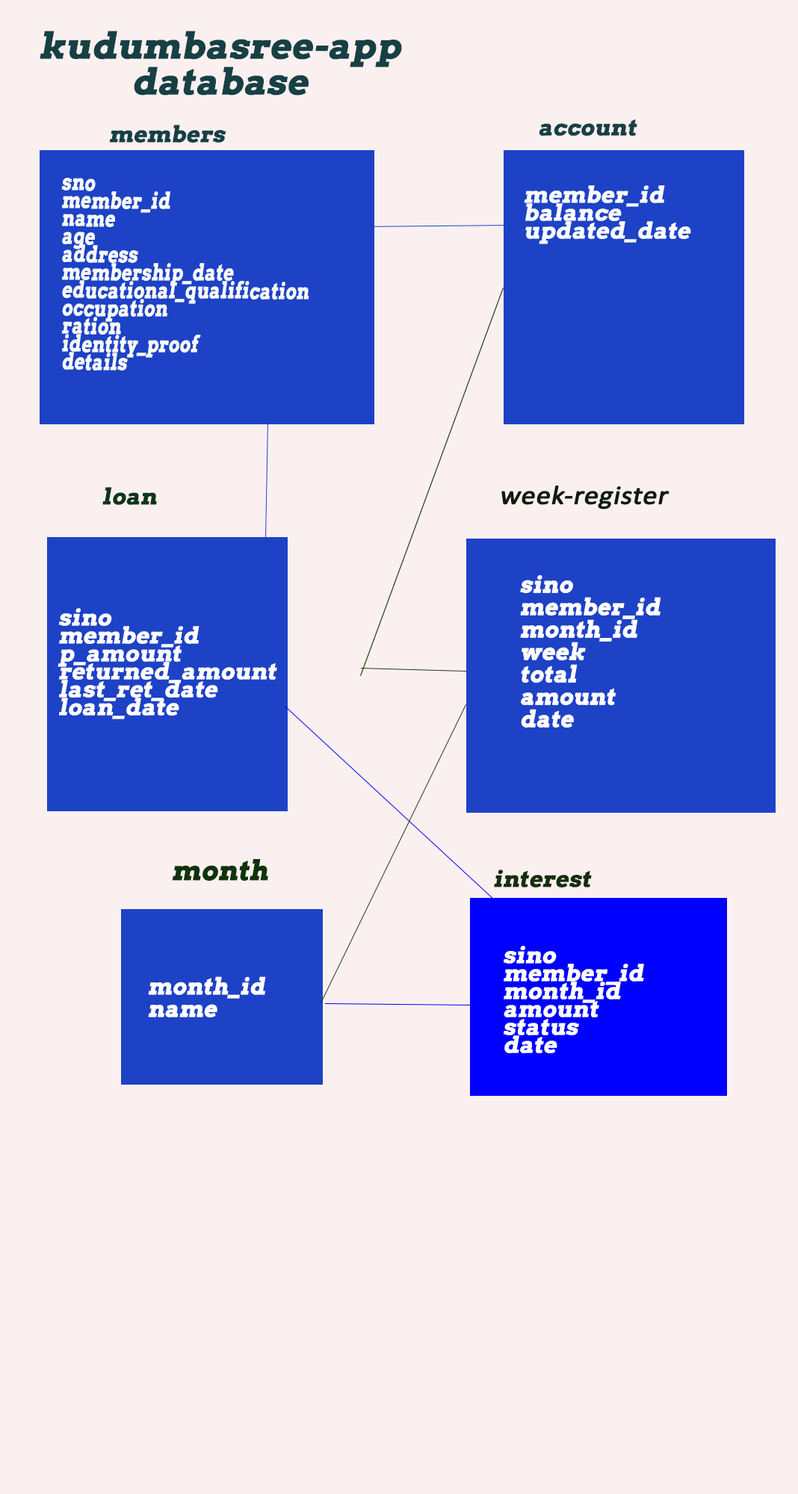
<style>
.page{position:relative;width:798px;height:1494px;background:#fbf0f0}
.page>*{position:absolute;margin:0}
.t1{font:35.9px/35.9px "Arvo-Bold";color:#164044;font-weight:bold;font-style:italic}
.t2{font:22.4px "Arvo-Bold";color:#164044;font-weight:bold;font-style:italic}
.t3{font:22.4px/17.9px "Arvo-Bold";color:#f6fbfb;font-weight:bold;font-style:italic;scale:0.77 1}
.t4{font:22.4px/17.9px "Arvo-Bold";color:#f7fcfd;font-weight:bold;font-style:italic}
.t5{font:26.4px "Calibri";color:#0f1c08;font-weight:bold;font-style:italic;scale:1.09 1}
.t6{font:22.4px "Arvo-Bold";color:#0d361b;font-weight:bold;font-style:italic}
.t7{font:22.4px/22.4px "Arvo-Bold";color:#ffffff;font-weight:bold;font-style:italic}
.t8{font:22.4px/17.9px "Arvo-Bold";color:#ffffff;font-weight:bold;font-style:italic}
.t9{font:26.9px "Arvo-Bold";color:#0f330a;font-weight:bold;font-style:italic}
.t10{font:22.4px "Arvo-Bold";color:#162e06;font-weight:bold;font-style:italic}
.t11{font:22.4px/17.9px "Arvo-Bold";color:#fcfffa;font-weight:bold;font-style:italic}
</style>
<div class="page">
<p class="t1" style="left:40px;top:31px;width:362px;height:65px;text-align:center">kudumbasree-app<br>database</p>
<p class="t2" style="left:109px;top:125px;width:117px;height:18px">members</p>
<p class="t2" style="left:539px;top:120px;width:98px;height:16px">account</p>
<p class="t3" style="left:61px;top:178px;width:248px;height:193px">sno<br>member_id<br>name<br>age<br>address<br>membership_date<br>educational_qualification<br>occupation<br>ration<br>identity_proof<br>details</p>
<p class="t4" style="left:524px;top:185px;width:167px;height:59px">member_id<br>balance<br>updated_date</p>
<p class="t5" style="left:501px;top:486px;width:168px;height:24px">week-register</p>
<p class="t6" style="left:102px;top:487px;width:55px;height:18px">loan</p>
<p class="t7" style="left:520px;top:575px;width:141px;height:153px">sino<br>member_id<br>month_id<br>week<br>total<br>amount<br>date</p>
<p class="t8" style="left:58px;top:608px;width:219px;height:112px">sino<br>member_id<br>p_amount<br>returned_amount<br>last_ret_date<br>loan_date</p>
<p class="t9" style="left:172px;top:859px;width:96px;height:22px">month</p>
<p class="t10" style="left:494px;top:870px;width:98px;height:18px">interest</p>
<p class="t11" style="left:504px;top:946px;width:140px;height:108px">sino<br>member_id<br>month_id<br>amount<br>status<br>date</p>
<p class="t7" style="left:148px;top:977px;width:118px;height:41px">month_id<br>name</p>
</div>
